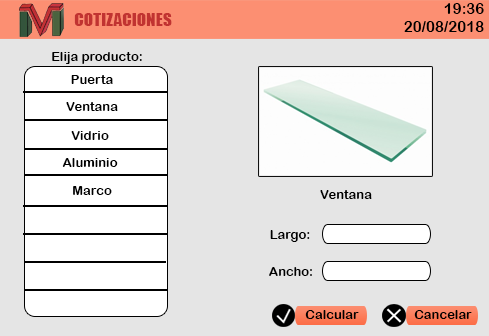
<style>
.page{position:relative;width:489px;height:336px;background:#e5e5e5}
.page>*{position:absolute;margin:0}
.t1{font:14.7px "ArialRoundedMTBold";color:#000000;scale:1.03 1}
.t2{font:17.3px "Impact";color:#c13331}
.t3{font:13px "ArialRoundedMTBold";color:#000000}
</style>
<div class="page">
<p class="t1" style="left:444px;top:3px;width:40px;height:11px">19:36</p>
<p class="t2" style="left:74px;top:13px;width:98px;height:13px">COTIZACIONES</p>
<p class="t1" style="left:404px;top:21px;width:80px;height:11px">20/08/2018</p>
<p class="t3" style="left:52px;top:52px;width:90px;height:12px">Elija producto:</p>
<p class="t3" style="left:71px;top:75px;width:42px;height:9px">Puerta</p>
<p class="t3" style="left:66px;top:102px;width:52px;height:9px">Ventana</p>
<p class="t3" style="left:71px;top:131px;width:38px;height:9px">Vidrio</p>
<p class="t3" style="left:62px;top:158px;width:56px;height:9px">Aluminio</p>
<p class="t3" style="left:73px;top:186px;width:39px;height:9px">Marco</p>
<p class="t3" style="left:320px;top:190px;width:52px;height:9px">Ventana</p>
<p class="t3" style="left:270px;top:230px;width:40px;height:12px">Largo:</p>
<p class="t3" style="left:269px;top:267px;width:43px;height:9px">Ancho:</p>
<p class="t3" style="left:305px;top:310px;width:54px;height:9px">Calcular</p>
<p class="t3" style="left:414px;top:310px;width:58px;height:9px">Cancelar</p>
</div>
